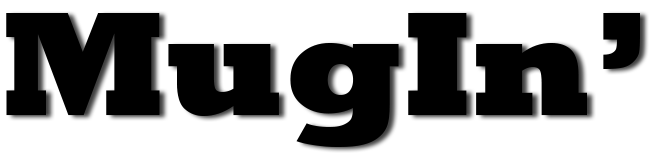
<style>
.page{position:relative;width:666px;height:153px;background:#ffffff}
.page>*{position:absolute;margin:0}
.t1{font:150px "Rockwell-ExtraBold";color:#000000}
</style>
<div class="page">
<p class="t1" style="left:6px;top:13px;width:634px;height:134px">MugIn’</p>
</div>
